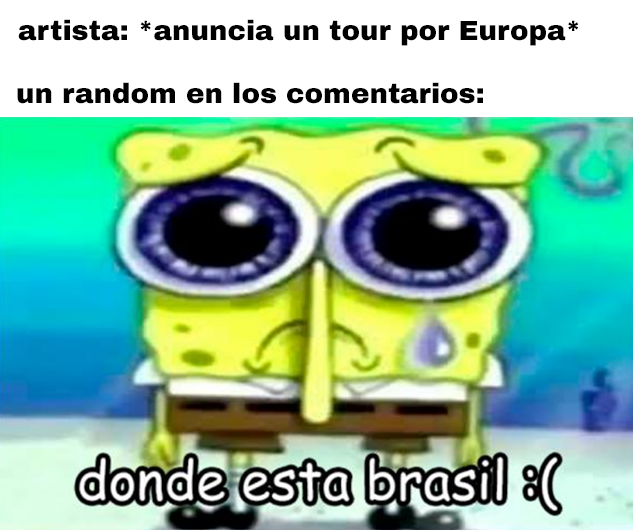
<style>
.page{position:relative;width:633px;height:530px}
.page>*{position:absolute;margin:0}
.t1{font:27.7px "ArchivoBlack-Regular";color:#000000}
</style>
<div class="page">
<p class="t1" style="left:18px;top:19px;width:561px;height:27px">artista: *anuncia un tour por Europa*</p>
<p class="t1" style="left:17px;top:82px;width:466px;height:22px">un random en los comentarios:</p>
</div>
